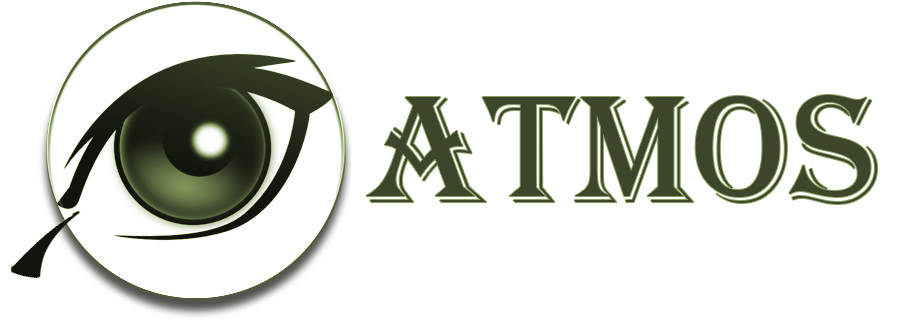
<style>
.page{position:relative;width:900px;height:320px;background:#ffffff}
.page>*{position:absolute;margin:0}
.t1{font:157.8px "Algerian";color:#3d462b}
</style>
<div class="page">
<p class="t1" style="left:366px;top:95px;width:512px;height:109px">ATMOS</p>
</div>
